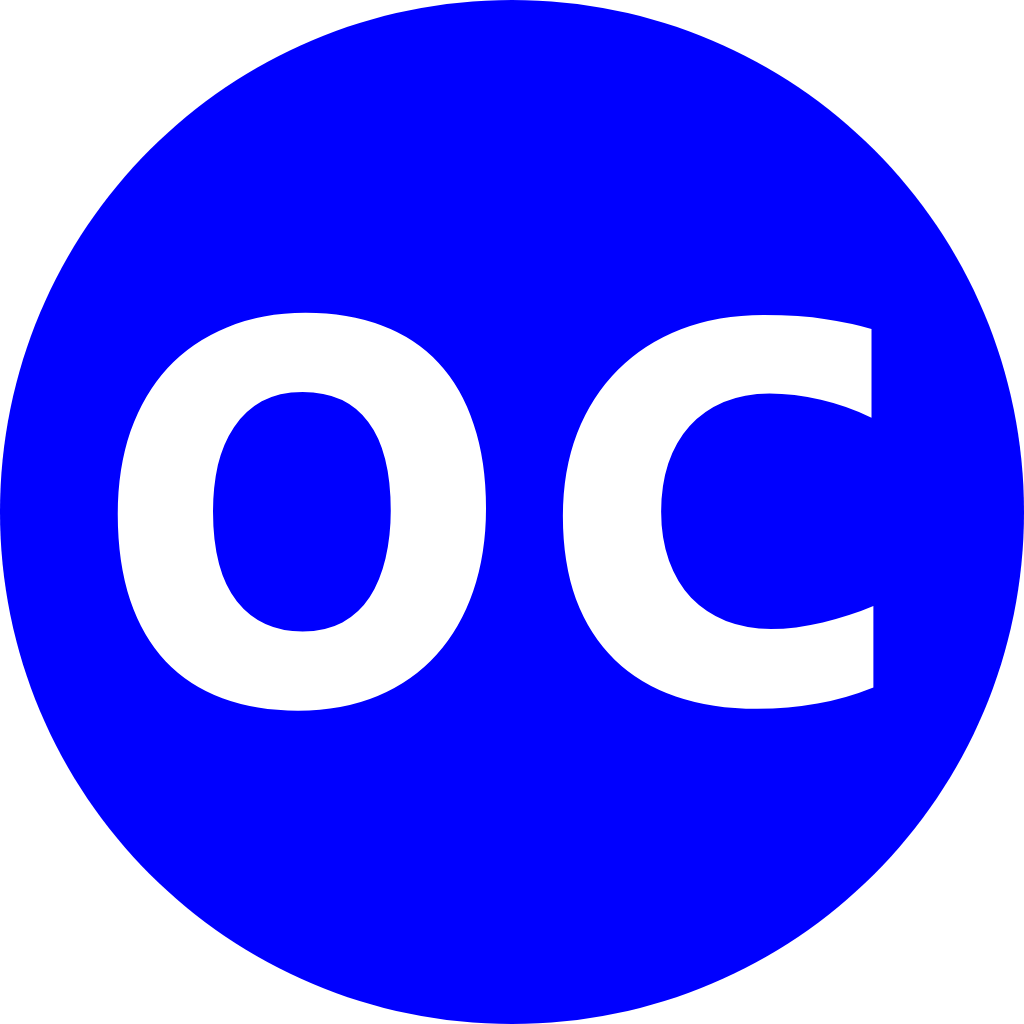
<style>
.page{position:relative;width:1024px;height:1024px;background:#0000ff}
.page>*{position:absolute;margin:0}
.t1{font:768px "Consolas-Bold";color:#ffffff}
</style>
<div class="page">
<p class="t1" style="left:117px;top:312px;width:757px;height:399px">oc</p>
</div>
